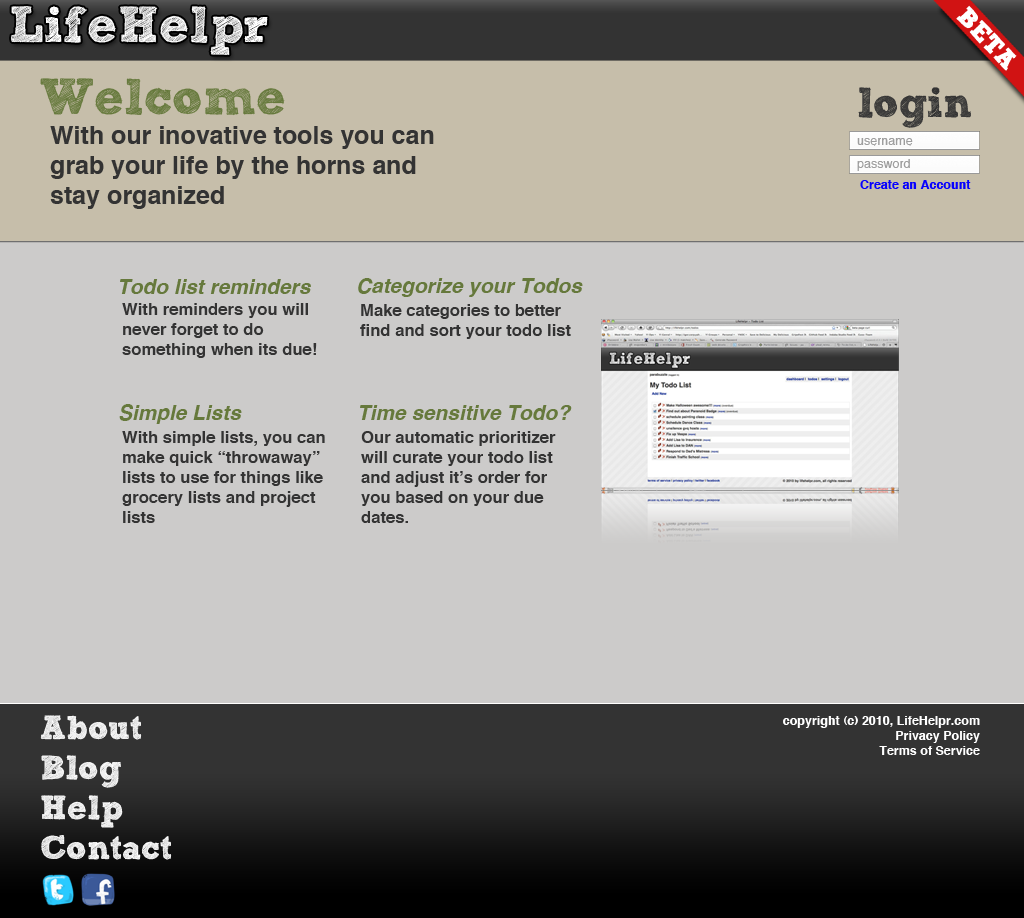
<style>
.page{position:relative;width:1024px;height:918px;background:#cccbca}
.page>*{position:absolute;margin:0}
.t1{font:50px "freeversionSketchBlock-Bold";color:#66793c}
.t2{font:41.7px "freeversionSketchBlock-Bold";color:#333333}
.t3{font:25px "Helvetica-Bold";color:#333333}
.t4{font:12.5px "Helvetica";color:#9e9e9e}
.t5{font:12.5px "Helvetica-Bold";color:#0600ff}
.t6{font:20.8px "Helvetica-BoldOblique";color:#66793c}
.t7{font:16.7px "Helvetica-Bold";color:#333333}
.t8{font:33.3px "freeversionSketchBlock-Bold";color:#ffffff}
.t9{font:12.5px "Helvetica-Bold";color:#ffffff}
</style>
<div class="page">
<p class="t1" style="left:40px;top:78px;width:245px;height:38px">Welcome</p>
<p class="t2" style="left:858px;top:87px;width:113px;height:41px">login</p>
<p class="t3" style="left:50px;top:126px;width:384px;height:83px">With our inovative tools you can<br>grab your life by the horns and<br>stay organized</p>
<p class="t4" style="left:857px;top:138px;width:56px;height:8px">username</p>
<p class="t4" style="left:857px;top:159px;width:53px;height:12px">password</p>
<p class="t5" style="left:860px;top:180px;width:111px;height:9px">Create an Account</p>
<p class="t6" style="left:120px;top:279px;width:191px;height:15px">Todo list reminders</p>
<p class="t6" style="left:358px;top:278px;width:225px;height:19px">Categorize your Todos</p>
<p class="t7" style="left:122px;top:303px;width:195px;height:55px">With reminders you will <br>never forget to do <br>something when its due!</p>
<p class="t7" style="left:360px;top:304px;width:211px;height:35px">Make categories to better find and sort your todo list</p>
<p class="t6" style="left:119px;top:404px;width:123px;height:20px">Simple Lists</p>
<p class="t6" style="left:360px;top:405px;width:212px;height:15px">Time sensitive Todo?</p>
<p class="t7" style="left:122px;top:431px;width:203px;height:92px">With simple lists, you can make quick “throwaway” lists to use for things like grocery lists and project lists</p>
<p class="t7" style="left:361px;top:431px;width:195px;height:92px">Our automatic prioritizer will curate your todo list and adjust it’s order for you based on your due dates.</p>
<p class="t8" style="left:40px;top:715px;width:132px;height:145px">About<br>Blog<br>Help<br>Contact</p>
<p class="t9" style="left:783px;top:716px;width:197px;height:39px;text-align:right">copyright (c) 2010, LifeHelpr.com<br>Privacy Policy<br>Terms of Service</p>
</div>
